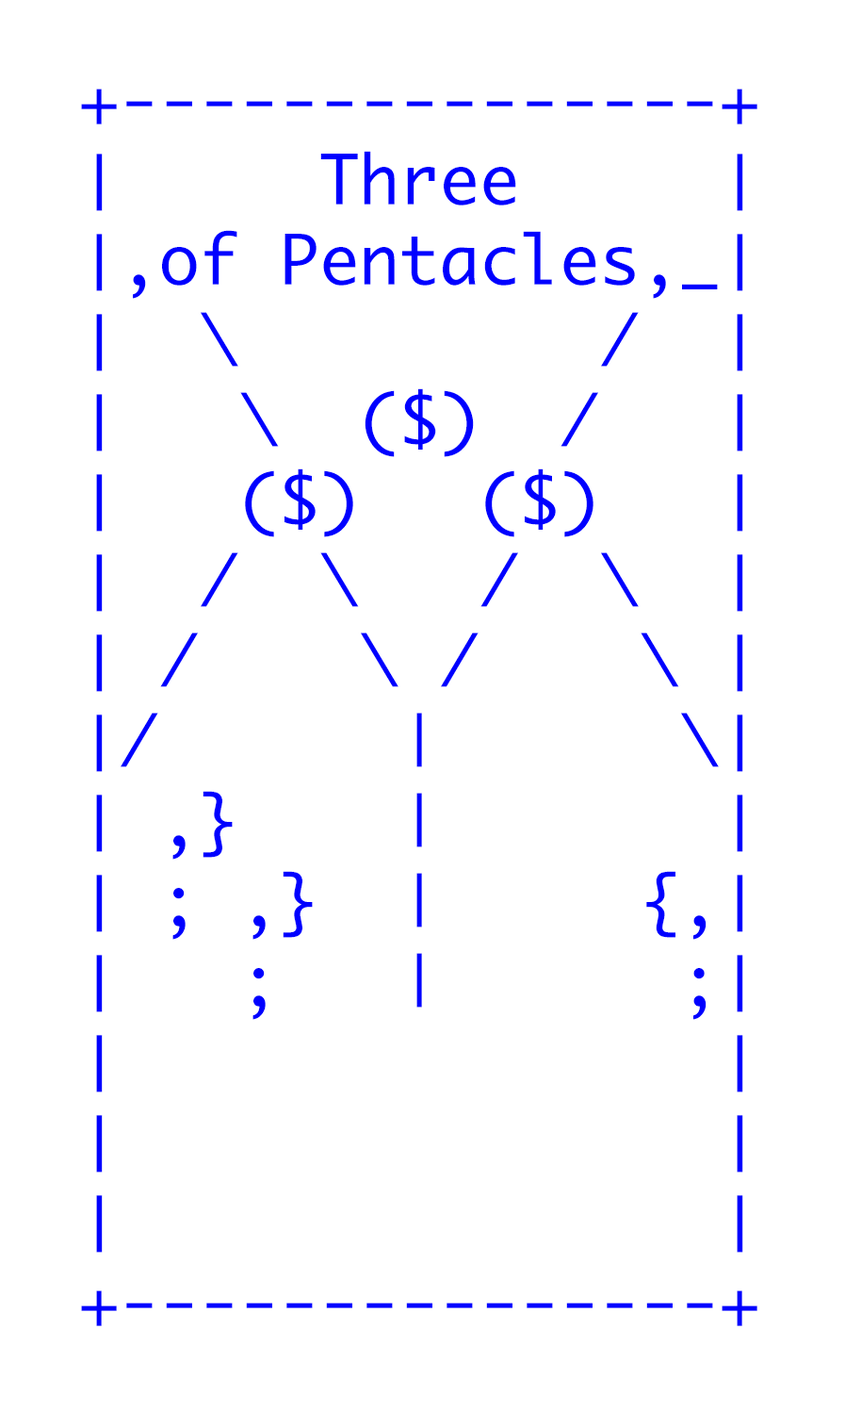
<style>
.page{position:relative;width:845px;height:1411px;background:#ffffff}
.page>*{position:absolute;margin:0}
.t1{font:66.7px "Monaco";color:#0000ff}
</style>
<div class="page">
<p class="t1" style="left:81px;top:89px;width:677px;height:1237px">+---------------+<br>│     Three     │<br>│,of Pentacles,_│<br>│  \         /  │<br>│   \  ($)  /   │<br>│   ($)   ($)   │<br>│  /  \   /  \  │<br>│ /    \ /    \ │ <br>│/      |      \│ <br>│ ,}    |       │<br>│ ; ,}  |     {,│ <br>│   ;   |      ;│ <br>│               │<br>│               │<br>│               │<br>+---------------+</p>
</div>
